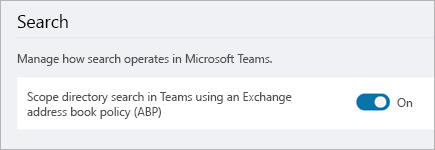
<style>
.page{position:relative;width:435px;height:150px;background:#f0f1f5}
.page>*{position:absolute;margin:0}
.t1{font:17.6px "SegoeUI";color:#000000}
.t2{font:11.7px "SegoeUI";color:#505050}
.t3{font:11.7px/15px "SegoeUI";color:#505050}
.t4{font:12px "SegoeUI";color:#505050}
</style>
<div class="page">
<p class="t1" style="left:17px;top:14px;width:51px;height:14px">Search</p>
<p class="t2" style="left:17px;top:54px;width:255px;height:12px">Manage how search operates in Microsoft Teams.</p>
<p class="t3" style="left:27px;top:92px;width:265px;height:27px">Scope directory search in Teams using an Exchange<br>address book policy (ABP)</p>
<p class="t4" style="left:397px;top:98px;width:16px;height:9px">On</p>
</div>
